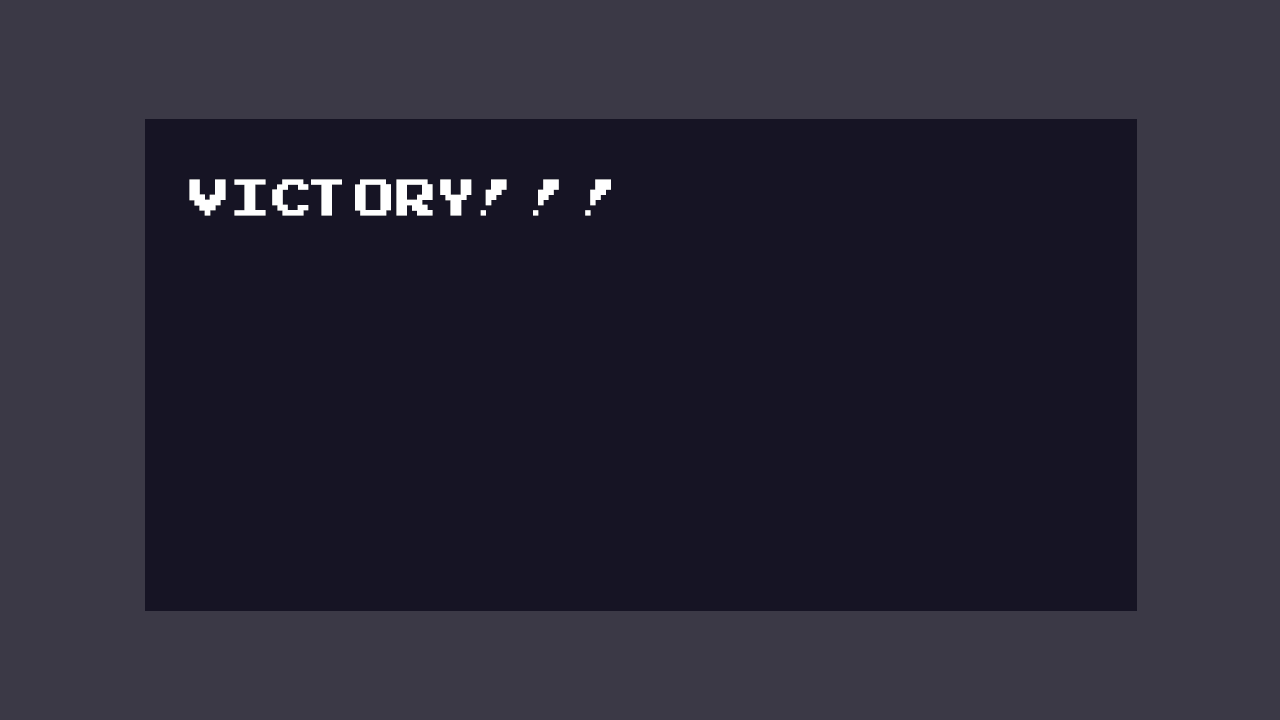
<style>
.page{position:relative;width:1280px;height:720px;background:#161424}
.page>*{position:absolute;margin:0}
.t1{font:72px "ArcadeClassic";letter-spacing:0.025em;color:#ffffff}
</style>
<div class="page">
<p class="t1" style="left:189px;top:179px;width:422px;height:37px">VICTORY!!!</p>
</div>
